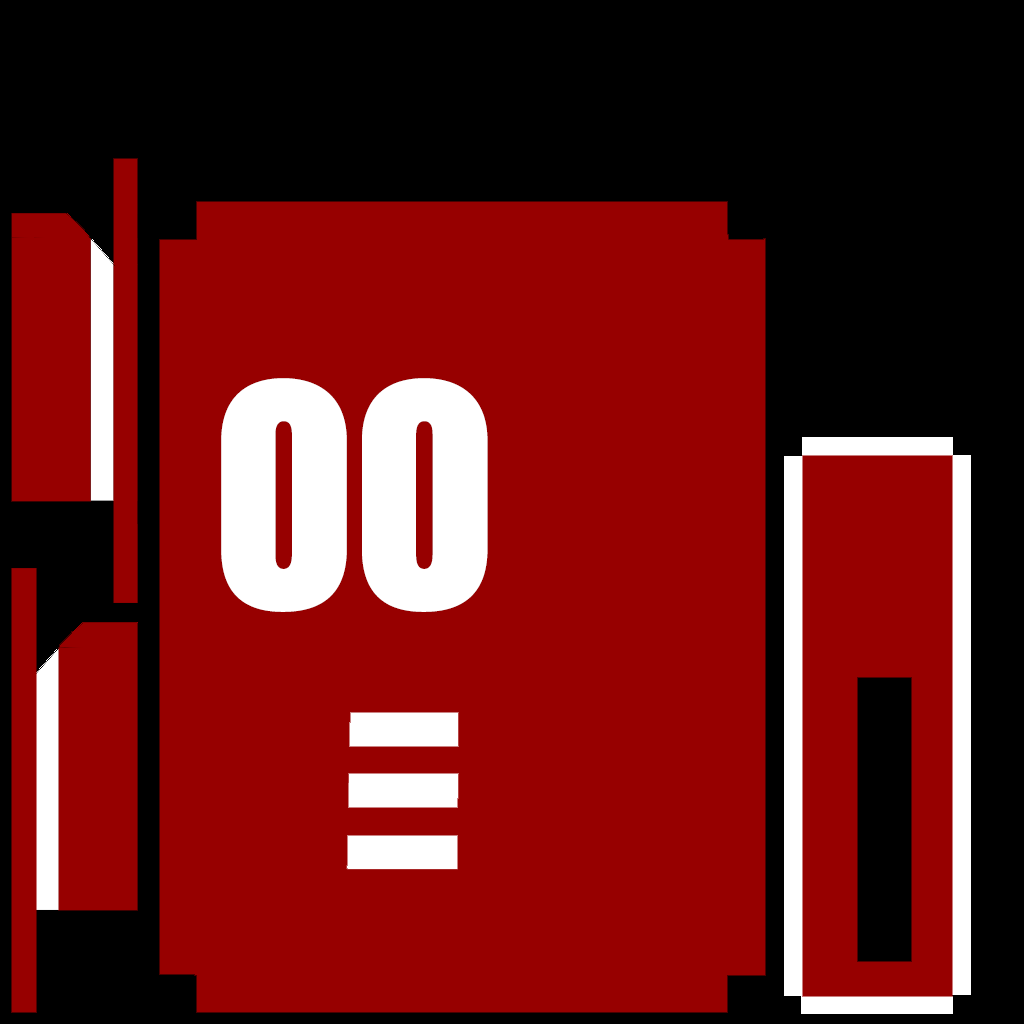
<style>
.page{position:relative;width:1024px;height:1024px;background:#970000}
.page>*{position:absolute;margin:0}
.t1{font:350px "AcuminConcept-ExtraCondensedUltraBlack";color:#ffffff}
</style>
<div class="page">
<p class="t1" style="left:221px;top:378px;width:267px;height:234px">00</p>
</div>
